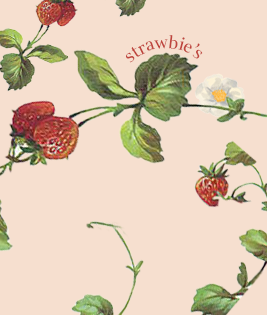
<style>
.page{position:relative;width:267px;height:315px;background:#f6dfcf}
.page>*{position:absolute;margin:0}
.t1{font:18.7px "MixtaSharpAlt-Regular";color:#bf443d}
</style>
<div class="page">
<p class="t1" style="left:126px;top:35px;width:77px;height:28px;rotate:14deg">strawbie’s</p>
</div>
